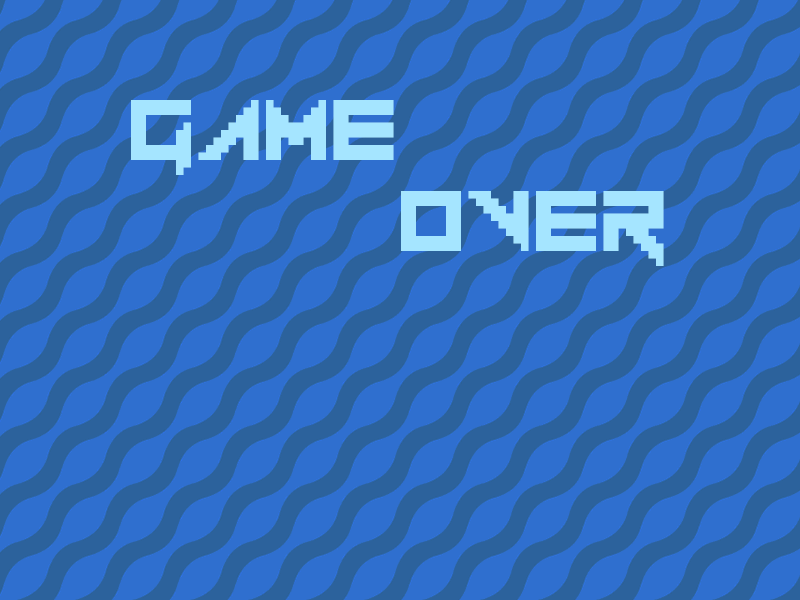
<style>
.page{position:relative;width:800px;height:600px;background:#2f6fcf}
.page>*{position:absolute;margin:0}
.t1{font:120px "Vermin-Vibes-1989";color:#a5e5ff}
</style>
<div class="page">
<p class="t1" style="left:131px;top:100px;width:263px;height:75px">GAME</p>
<p class="t1" style="left:401px;top:191px;width:263px;height:75px">OVER</p>
</div>
